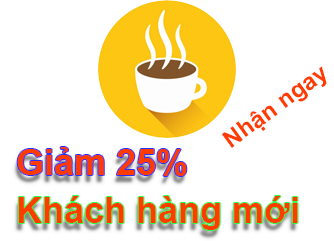
<style>
.page{position:relative;width:334px;height:241px;background:#ffffff}
.page>*{position:absolute;margin:0}
.t1{font:24px "Arial-BoldMT";color:#fe3c00}
.t2{font:36px "Arial-BoldMT";color:#fe3c00}
</style>
<div class="page">
<p class="t1" style="left:221px;top:66px;width:106px;height:82px;rotate:-36deg">Nhận ngay</p>
<p class="t2" style="left:17px;top:147px;width:170px;height:29px">Giảm 25%</p>
<p class="t2" style="left:18px;top:196px;width:280px;height:34px">Khách hàng mới</p>
</div>
